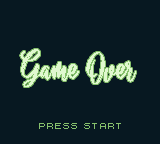
<style>
.page{position:relative;width:160px;height:144px;background:#071821}
.page>*{position:absolute;margin:0}
.t1{font:40px "SailingHeart";color:#e0f8cf}
</style>
<div class="page">
<p class="t1" style="left:20px;top:49px;width:116px;height:38px">Game Over</p>
</div>
